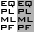
<style>
.page{position:relative;width:34px;height:32px;background:#ffffff}
.page>*{position:absolute;margin:0}
.t1{font:12px "BankGothicBT-Medium";color:#000000}
</style>
<div class="page">
<p class="t1" style="left:1px;top:1px;width:14px;height:7px">eq</p>
<p class="t1" style="left:18px;top:1px;width:14px;height:7px">eq</p>
<p class="t1" style="left:1px;top:17px;width:15px;height:5px">ml</p>
<p class="t1" style="left:1px;top:9px;width:13px;height:5px">pl</p>
<p class="t1" style="left:18px;top:17px;width:15px;height:5px">ml</p>
<p class="t1" style="left:18px;top:9px;width:13px;height:5px">pl</p>
<p class="t1" style="left:1px;top:25px;width:13px;height:5px">pf</p>
<p class="t1" style="left:18px;top:25px;width:13px;height:5px">pf</p>
</div>
